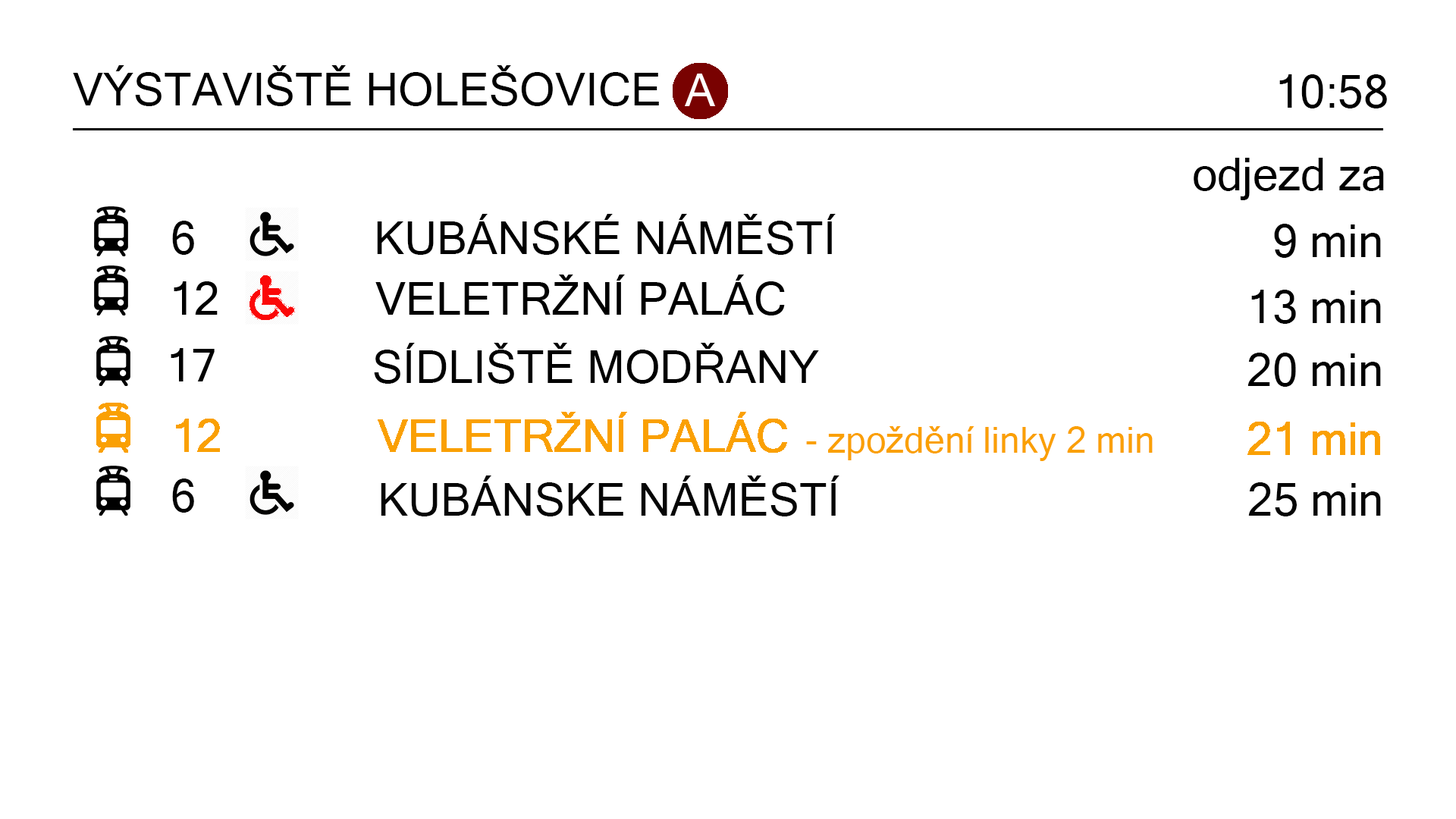
<style>
.page{position:relative;width:1456px;height:819px;background:#ffffff}
.page>*{position:absolute;margin:0}
.t1{font:45.5px "MicrosoftSansSerif";color:#000000}
.t2{font:36.4px "MicrosoftSansSerif";color:#faa003}
.t3{font:45.5px "MicrosoftSansSerif";color:#faa003}
.t4{font:45.5px "MicrosoftSansSerif";color:#030303}
.t5{font:45.5px "MicrosoftSansSerif";color:#050505}
</style>
<div class="page">
<p class="t1" style="left:73px;top:65px;width:586px;height:41px">VÝSTAVIŠTĚ HOLEŠOVICE</p>
<p class="t1" style="left:1279px;top:74px;width:108px;height:34px">10:58</p>
<p class="t1" style="left:1194px;top:158px;width:190px;height:42px">odjezd za</p>
<p class="t1" style="left:172px;top:214px;width:664px;height:41px">6        KUBÁNSKÉ NÁMĚSTÍ</p>
<p class="t1" style="left:1274px;top:224px;width:107px;height:34px">9 min</p>
<p class="t1" style="left:1251px;top:290px;width:130px;height:34px">13 min</p>
<p class="t1" style="left:374px;top:343px;width:445px;height:41px">SÍDLIŠTĚ MODŘANY</p>
<p class="t1" style="left:1247px;top:353px;width:134px;height:34px">20 min</p>
<p class="t2" style="left:806px;top:426px;width:347px;height:35px"><span class="t3"> </span>- zpoždění linky 2 min</p>
<p class="t4" style="left:172px;top:479px;width:22px;height:34px">6</p>
<p class="t5" style="left:381px;top:475px;width:458px;height:41px">KUBÁNSKE NÁMĚSTÍ</p>
<p class="t5" style="left:1248px;top:482px;width:133px;height:34px">25 min</p>
</div>
